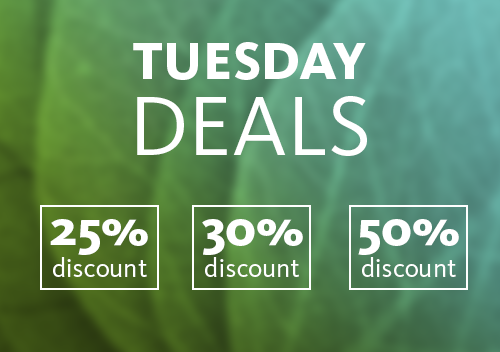
<style>
.page{position:relative;width:500px;height:352px}
.page>*{position:absolute;margin:0}
.t1{font:54.5px/76.5px "KievitOT-ExtraBold";color:#ffffff}
.t2{font:87.5px/76.5px "KievitOT-Regular";color:#ffffff}
.t3{font:26.9px "KievitOT-Regular";color:#ffffff}
.t4{font:52.4px "KievitOT-ExtraBold";color:#ffffff}
</style>
<div class="page">
<p class="t1" style="left:133px;top:42px;width:234px;height:114px;text-align:center">TUESDAY<br><span class="t2">DEALS</span></p>
<p class="t3" style="left:50px;top:219px;width:98px;height:58px;text-align:center"><span class="t4">25%<br></span>discount</p>
<p class="t3" style="left:202px;top:219px;width:101px;height:58px;text-align:center"><span class="t4">30%<br></span>discount</p>
<p class="t3" style="left:358px;top:219px;width:101px;height:58px;text-align:center"><span class="t4">50%<br></span>discount</p>
</div>
